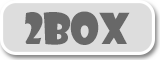
<style>
.page{position:relative;width:160px;height:60px;background:#dddddd}
.page>*{position:absolute;margin:0}
.t1{font:41.7px "ShowcardGothic-Reg";color:#686868}
</style>
<div class="page">
<p class="t1" style="left:25px;top:11px;width:105px;height:34px">2BOX</p>
</div>
